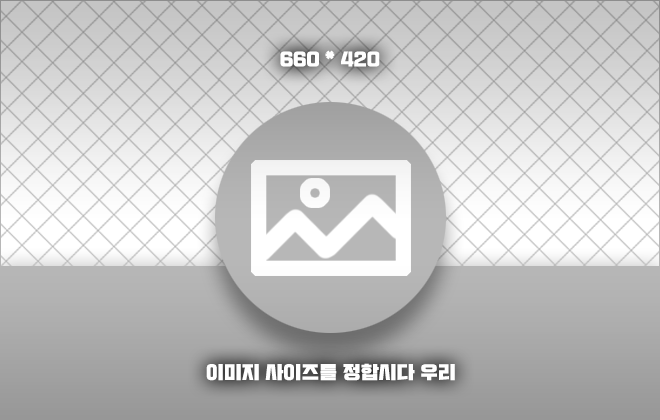
<style>
.page{position:relative;width:660px;height:420px}
.page>*{position:absolute;margin:0}
.t1{font:18.1px "Typo_SsangmunDong_B";color:#ffffff}
</style>
<div class="page">
<p class="t1" style="left:280px;top:50px;width:100px;height:17px">660 * 420</p>
<p class="t1" style="left:206px;top:363px;width:249px;height:18px">이미지 사이즈를 정합시다 우리</p>
</div>
